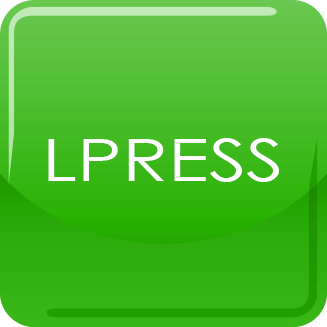
<style>
.page{position:relative;width:327px;height:327px}
.page>*{position:absolute;margin:0}
.t1{font:58.3px "CenturyGothic";color:#ffffff;scale:1.3 1}
</style>
<div class="page">
<p class="t1" style="left:48px;top:138px;width:231px;height:44px">LPRESS</p>
</div>
